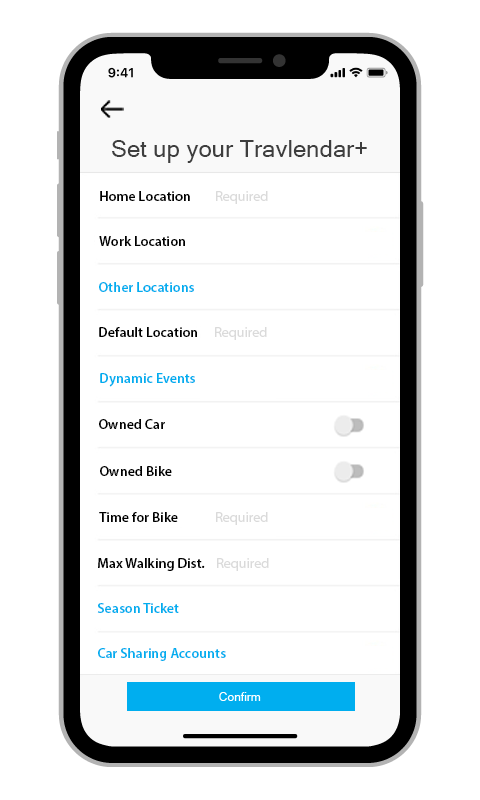
<style>
.page{position:relative;width:480px;height:800px;background:#ffffff}
.page>*{position:absolute;margin:0}
.t1{font:24px "MicrosoftSansSerif";color:#3e3e3e}
.t2{font:14px "MyriadPro-Semibold";color:#000000}
.t3{font:14px "MyriadPro-Regular";color:#dadada}
.t4{font:14px "MyriadPro-Semibold";color:#00aeef}
</style>
<div class="page">
<p class="t1" style="left:112px;top:140px;width:255px;height:23px">Set up your Travlendar+</p>
<p class="t2" style="left:100px;top:191px;width:90px;height:10px">Home Location</p>
<p class="t3" style="left:216px;top:191px;width:52px;height:13px">Required</p>
<p class="t2" style="left:99px;top:236px;width:86px;height:10px">Work Location</p>
<p class="t4" style="left:99px;top:282px;width:95px;height:10px">Other Locations</p>
<p class="t2" style="left:99px;top:327px;width:98px;height:10px">Default Location</p>
<p class="t3" style="left:215px;top:327px;width:52px;height:13px">Required</p>
<p class="t4" style="left:100px;top:373px;width:95px;height:14px">Dynamic Events</p>
<p class="t2" style="left:99px;top:419px;width:66px;height:10px">Owned Car</p>
<p class="t2" style="left:100px;top:466px;width:72px;height:10px">Owned Bike</p>
<p class="t2" style="left:99px;top:512px;width:79px;height:10px">Time for Bike</p>
<p class="t3" style="left:216px;top:512px;width:52px;height:13px">Required</p>
<p class="t2" style="left:98px;top:558px;width:107px;height:13px">Max Walking Dist.</p>
<p class="t3" style="left:217px;top:558px;width:52px;height:13px">Required</p>
<p class="t4" style="left:97px;top:603px;width:82px;height:10px">Season Ticket</p>
<p class="t4" style="left:98px;top:648px;width:128px;height:13px">Car Sharing Accounts</p>
</div>
